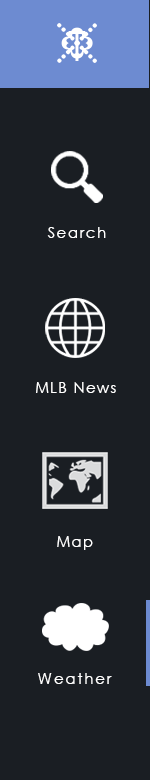
<style>
.page{position:relative;width:150px;height:780px;background:#1a1e23}
.page>*{position:absolute;margin:0}
.t1{font:10px "CenturyGothic";letter-spacing:0.1em;color:#ffffff}
.t2{font:15px "CenturyGothic";letter-spacing:0.1em;color:#ffffff}
.t3{font:14.6px "CenturyGothic";letter-spacing:0.1em;color:#ffffff}
.t4{font:15.5px "CenturyGothic";letter-spacing:0.1em;color:#ffffff}
</style>
<div class="page">
<p class="t1" style="left:68px;top:31px;width:18px;height:30px">T</p>
<p class="t2" style="left:47px;top:227px;width:59px;height:11px">Search</p>
<p class="t3" style="left:36px;top:382px;width:80px;height:11px">MLB News</p>
<p class="t3" style="left:57px;top:536px;width:36px;height:14px">Map</p>
<p class="t4" style="left:38px;top:673px;width:74px;height:11px">Weather</p>
</div>
